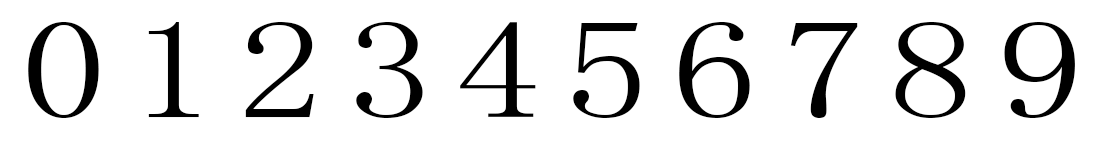
<style>
.page{position:relative;width:1100px;height:142px;background:#ffffff}
.page>*{position:absolute;margin:0}
.t1{font:140px "SimSun";letter-spacing:0.12em;color:#000000;scale:1.25 1}
</style>
<div class="page">
<p class="t1" style="left:28px;top:22px;width:1047px;height:96px">0123456789</p>
</div>
